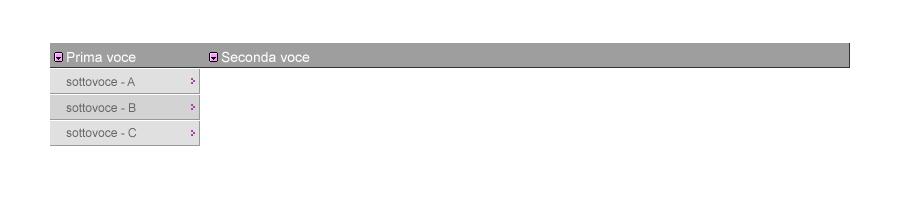
<style>
.page{position:relative;width:900px;height:211px;background:#ffffff}
.page>*{position:absolute;margin:0}
.t1{font:14px "ArialMT";color:#ffffff}
.t2{font:12px "ArialMT";color:#666666}
</style>
<div class="page">
<p class="t1" style="left:67px;top:52px;width:69px;height:10px">Prima voce</p>
<p class="t1" style="left:221px;top:51px;width:89px;height:12px">Seconda voce</p>
<p class="t2" style="left:66px;top:77px;width:69px;height:9px">sottovoce - A</p>
<p class="t2" style="left:66px;top:103px;width:70px;height:9px">sottovoce - B</p>
<p class="t2" style="left:66px;top:128px;width:71px;height:10px">sottovoce - C</p>
</div>
